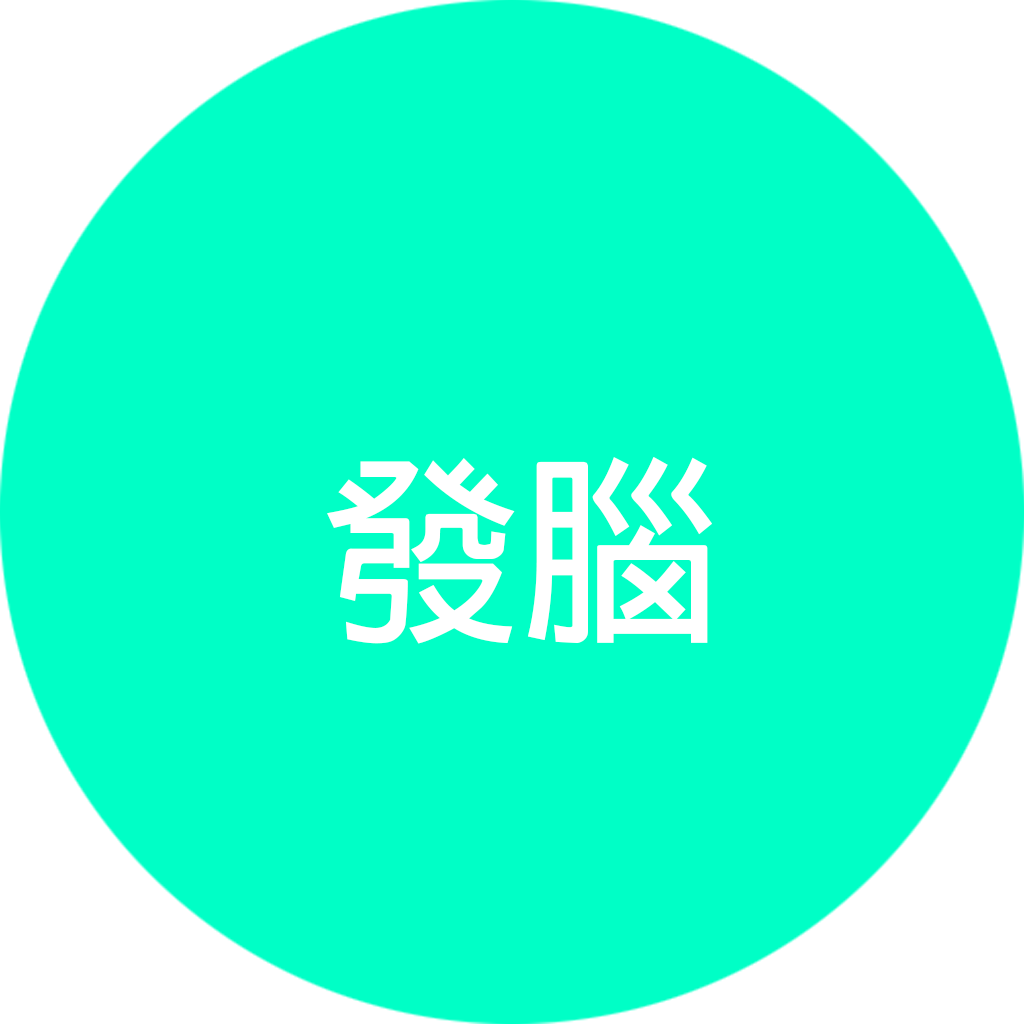
<style>
.page{position:relative;width:1024px;height:1024px;background:#00ffc6}
.page>*{position:absolute;margin:0}
.t1{font:200px "AdobeFanHeitiStd-Bold";color:#ffffff}
</style>
<div class="page">
<p class="t1" style="left:327px;top:456px;width:385px;height:188px">發腦</p>
</div>
